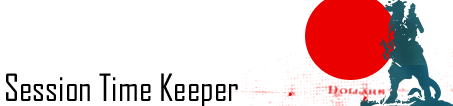
<style>
.page{position:relative;width:453px;height:106px;background:#ffffff}
.page>*{position:absolute;margin:0}
.t1{font:36px "AgencyFB-Reg";color:#000000}
</style>
<div class="page">
<p class="t1" style="left:6px;top:73px;width:232px;height:35px">Session Time Keeper</p>
</div>
